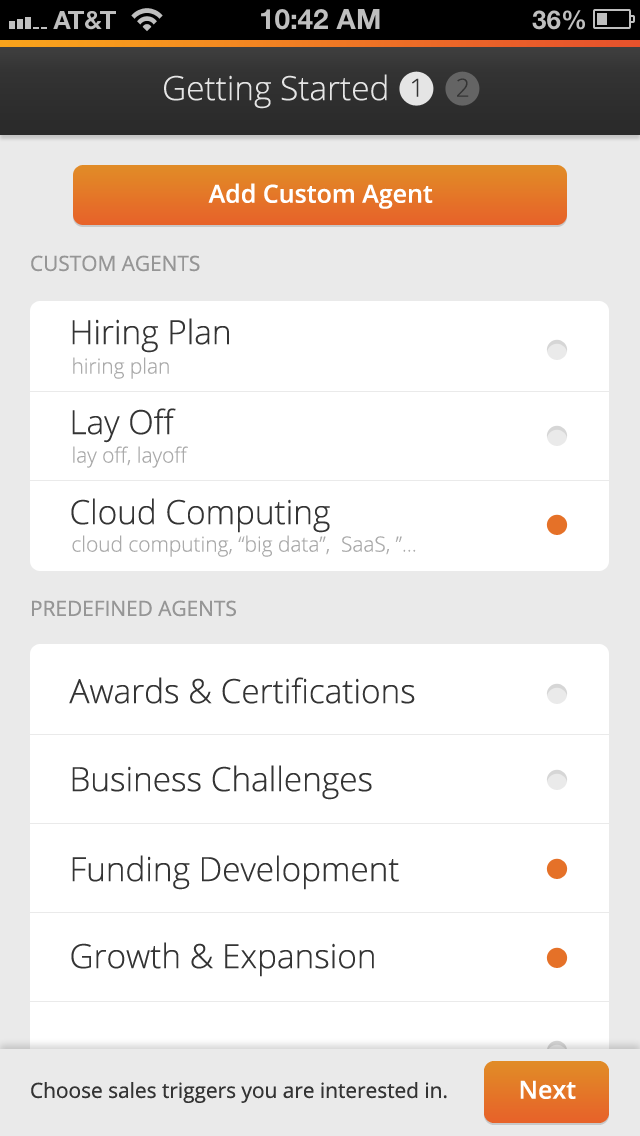
<style>
.page{position:relative;width:640px;height:1136px;background:#ffffff}
.page>*{position:absolute;margin:0}
.t1{font:33.3px "OpenSans-Light";color:#e5e5e5}
.t2{font:25px "OpenSans-Light";color:#343434}
.t3{font:25px "OpenSans-Semibold";color:#ffffff}
.t4{font:20.8px "OpenSans";color:#969696}
.t5{font:33.3px "OpenSans-Light";color:#343434}
.t6{font:20.8px "OpenSans-Light";color:#aaaaaa}
.t7{font:20.8px "OpenSans";color:#343434}
</style>
<div class="page">
<p class="t1" style="left:164px;top:74px;width:223px;height:35px">Getting Started</p>
<p class="t2" style="left:412px;top:78px;width:7px;height:19px">1</p>
<p class="t2" style="left:457px;top:78px;width:12px;height:19px">2</p>
<p class="t3" style="left:208px;top:183px;width:225px;height:26px">Add Custom Agent</p>
<p class="t4" style="left:31px;top:255px;width:169px;height:17px">CUSTOM AGENTS</p>
<p class="t5" style="left:72px;top:318px;width:157px;height:35px">Hiring Plan</p>
<p class="t6" style="left:73px;top:357px;width:96px;height:22px">hiring plan</p>
<p class="t5" style="left:72px;top:408px;width:104px;height:35px">Lay Off</p>
<p class="t6" style="left:73px;top:446px;width:115px;height:22px">lay off, layoff</p>
<p class="t5" style="left:71px;top:498px;width:259px;height:35px">Cloud Computing</p>
<p class="t6" style="left:72px;top:535px;width:344px;height:22px">cloud computing, “big data”,  SaaS, ”...</p>
<p class="t4" style="left:32px;top:600px;width:204px;height:17px">PREDEFINED AGENTS</p>
<p class="t5" style="left:69px;top:677px;width:346px;height:27px">Awards &amp; Certifications</p>
<p class="t5" style="left:72px;top:765px;width:300px;height:35px">Business Challenges</p>
<p class="t5" style="left:72px;top:855px;width:327px;height:35px">Funding Development</p>
<p class="t5" style="left:71px;top:942px;width:303px;height:35px">Growth &amp; Expansion</p>
<p class="t7" style="left:31px;top:1082px;width:416px;height:21px">Choose sales triggers you are interested in.</p>
<p class="t3" style="left:520px;top:1080px;width:56px;height:19px">Next</p>
</div>
